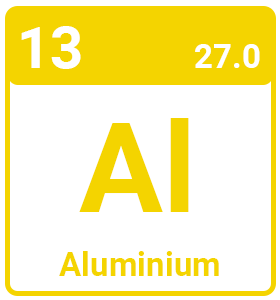
<style>
.page{position:relative;width:280px;height:300px;background:#ffffff}
.page>*{position:absolute;margin:0}
.t1{font:58.3px "Roboto-Bold";color:#ffffff}
.t2{font:33.3px "Roboto-Bold";color:#ffffff}
.t3{font:125px "Roboto-Bold";color:#f4d400}
.t4{font:33.3px "Roboto-Bold";color:#f4d400}
</style>
<div class="page">
<p class="t1" style="left:21px;top:26px;width:60px;height:43px">13</p>
<p class="t2" style="left:195px;top:44px;width:65px;height:24px">27.0</p>
<p class="t3" style="left:79px;top:118px;width:110px;height:94px">Al</p>
<p class="t4" style="left:59px;top:251px;width:160px;height:25px">Aluminium</p>
</div>
